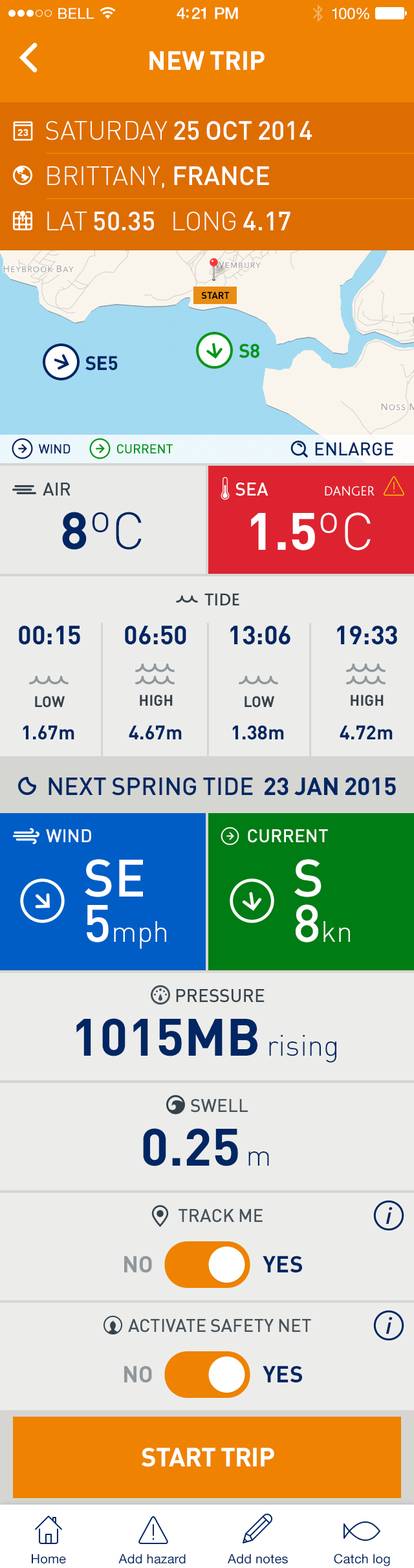
<style>
.page{position:relative;width:414px;height:1568px;background:#ecedeb}
.page>*{position:absolute;margin:0}
.t1{font:14.9px "HelveticaNeue";letter-spacing:0.02em;color:#ffffff}
.t2{font:16.2px "HelveticaNeue-Medium";letter-spacing:-0.02em;color:#ffffff}
.t3{font:15.5px "HelveticaNeue";letter-spacing:-0.02em;color:#ffffff}
.t4{font:25.9px "DIN-Bold";color:#ffffff;text-transform:uppercase}
.t5{font:25.9px/45.3px "DIN-Medium";color:#ffffff;text-transform:uppercase}
.t6{font:25.9px/45.3px "DIN-Light";color:#ffffff;text-transform:uppercase}
.t7{font:9.7px "DIN-Bold";letter-spacing:-0.015em;color:#000000;text-transform:uppercase}
.t8{font:19.4px "DIN-Bold";letter-spacing:-0.015em;color:#009619;text-transform:uppercase}
.t9{font:19.4px "DIN-Bold";letter-spacing:-0.015em;color:#002663;text-transform:uppercase}
.t10{font:12.9px "DIN-Medium";letter-spacing:-0.015em;color:#002663;text-transform:uppercase}
.t11{font:12.9px "DIN-Medium";letter-spacing:-0.015em;color:#009619;text-transform:uppercase}
.t12{font:18.1px "DIN-Medium";color:#002663;text-transform:uppercase}
.t13{font:18.1px "DIN-Medium";color:#36424a;text-transform:uppercase}
.t14{font:18.1px "DIN-Medium";color:#ffffff;text-transform:uppercase}
.t15{font:14px "Bliss2-Light";color:#ffffff;text-transform:uppercase}
.t16{font:51.7px "DIN-Light";color:#002663}
.t17{font:51.7px "DIN-Bold";color:#002663;text-transform:uppercase}
.t18{font:51.7px "DIN-Bold";color:#ffffff;text-transform:uppercase}
.t19{font:51.7px "DIN-Light";color:#ffffff}
.t20{font:18.1px "Bliss2-Medium";color:#36424a;text-transform:uppercase}
.t21{font:25.9px "DIN-Bold";color:#002663;text-transform:uppercase}
.t22{font:15px "DIN-Bold";color:#36424a;text-transform:uppercase}
.t23{font:19.4px "DIN-Bold";color:#002663}
.t24{font:24.4px "DIN-Medium";color:#002663;text-transform:uppercase}
.t25{font:24.4px "DIN-Bold";color:#002663;text-transform:uppercase}
.t26{font:29.1px/45.3px "DIN-Light";color:#ffffff}
.t27{font:51.7px/82.1px "DIN-Medium";color:#ffffff;text-transform:uppercase}
.t28{font:51.7px/45.3px "DIN-Medium";color:#ffffff}
.t29{font:29.1px "DIN-Light";color:#002663}
.t30{font:18.1px "DIN-Medium";color:#48535a;text-transform:uppercase}
.t31{font:24.4px "Bliss2-MediumItalic";color:#002663}
.t32{font:22.6px "DIN-Bold";color:#91979a;text-transform:uppercase}
.t33{font:22.6px "DIN-Bold";color:#002663;text-transform:uppercase}
.t34{font:25.9px "DIN-Bold";letter-spacing:-0.015em;color:#ffffff;text-transform:uppercase}
.t35{font:12.9px "HelveticaNeue";letter-spacing:0.01em;color:#002663}
</style>
<div class="page">
<p class="t1" style="left:58px;top:8px;width:36px;height:11px">BELL</p>
<p class="t2" style="left:177px;top:7px;width:61px;height:12px">4:21 PM</p>
<p class="t3" style="left:332px;top:8px;width:37px;height:11px">100%</p>
<p class="t4" style="left:149px;top:51px;width:116px;height:19px">new trip</p>
<p class="t5" style="left:46px;top:121px;width:266px;height:110px"><span class="t6">Saturday </span>25 Oct 2014<br><span class="t6">Brittany, </span>France<br><span class="t6">LAT </span>50.35<span class="t6">   LONG </span>4.17</p>
<p class="t7" style="left:201px;top:292px;width:29px;height:7px">START</p>
<p class="t8" style="left:239px;top:343px;width:20px;height:15px">S8</p>
<p class="t9" style="left:85px;top:356px;width:33px;height:15px">SE5</p>
<p class="t10" style="left:38px;top:444px;width:33px;height:9px">wind</p>
<p class="t11" style="left:117px;top:444px;width:56px;height:9px">current</p>
<p class="t12" style="left:315px;top:442px;width:78px;height:14px">enlarge</p>
<p class="t13" style="left:43px;top:483px;width:28px;height:12px">air</p>
<p class="t14" style="left:235px;top:483px;width:33px;height:13px">sea</p>
<p class="t15" style="left:325px;top:486px;width:50px;height:10px">danger</p>
<p class="t16" style="left:62px;top:512px;width:80px;height:38px"><span class="t17">8</span>ºC</p>
<p class="t18" style="left:251px;top:512px;width:120px;height:38px">1.5<span class="t19">ºC</span></p>
<p class="t20" style="left:204px;top:593px;width:35px;height:12px">tide</p>
<p class="t21" style="left:19px;top:626px;width:61px;height:19px">00:15</p>
<p class="t21" style="left:125px;top:626px;width:61px;height:19px">06:50</p>
<p class="t21" style="left:230px;top:626px;width:60px;height:19px">13:06</p>
<p class="t21" style="left:337px;top:626px;width:60px;height:19px">19:33</p>
<p class="t22" style="left:35px;top:696px;width:30px;height:12px">LOW</p>
<p class="t22" style="left:140px;top:695px;width:33px;height:11px">high</p>
<p class="t22" style="left:245px;top:696px;width:30px;height:12px">LOW</p>
<p class="t22" style="left:351px;top:695px;width:33px;height:11px">high</p>
<p class="t23" style="left:23px;top:725px;width:51px;height:15px">1.67m</p>
<p class="t23" style="left:129px;top:725px;width:53px;height:15px">4.67m</p>
<p class="t23" style="left:232px;top:725px;width:52px;height:15px">1.38m</p>
<p class="t23" style="left:340px;top:725px;width:53px;height:14px">4.72m</p>
<p class="t24" style="left:49px;top:778px;width:347px;height:18px">Next spring tide  <span class="t25">23 jan 2015</span></p>
<p class="t14" style="left:46px;top:829px;width:45px;height:13px">WIND</p>
<p class="t14" style="left:248px;top:829px;width:80px;height:14px">CUrrent</p>
<p class="t26" style="left:85px;top:859px;width:81px;height:90px"><span class="t27">SE<br></span><span class="t28">5</span>mph</p>
<p class="t26" style="left:294px;top:859px;width:56px;height:83px"><span class="t27">S<br></span><span class="t28">8</span>kn</p>
<p class="t13" style="left:176px;top:989px;width:89px;height:14px">pressure</p>
<p class="t17" style="left:76px;top:1018px;width:260px;height:45px">1015mb<span class="t29"> rising</span></p>
<p class="t30" style="left:190px;top:1099px;width:58px;height:14px">swell</p>
<p class="t17" style="left:143px;top:1128px;width:126px;height:38px">0.25<span class="t29"> m</span></p>
<p class="t30" style="left:179px;top:1209px;width:84px;height:14px">track me</p>
<p class="t31" style="left:386px;top:1207px;width:7px;height:17px">i</p>
<p class="t32" style="left:124px;top:1256px;width:28px;height:17px">NO</p>
<p class="t33" style="left:263px;top:1256px;width:39px;height:17px">Yes</p>
<p class="t30" style="left:128px;top:1319px;width:183px;height:14px">activate safety net</p>
<p class="t31" style="left:386px;top:1317px;width:7px;height:17px">i</p>
<p class="t32" style="left:124px;top:1366px;width:28px;height:17px">NO</p>
<p class="t33" style="left:263px;top:1366px;width:39px;height:17px">Yes</p>
<p class="t34" style="left:142px;top:1448px;width:132px;height:19px">start trip</p>
<p class="t35" style="left:32px;top:1554px;width:34px;height:9px">Home</p>
<p class="t35" style="left:118px;top:1554px;width:68px;height:9px">Add hazard</p>
<p class="t35" style="left:228px;top:1554px;width:60px;height:9px">Add notes</p>
<p class="t35" style="left:334px;top:1554px;width:56px;height:12px">Catch log</p>
</div>
